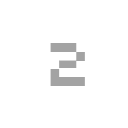
<style>
.page{position:relative;width:128px;height:128px;background:#ffffff}
.page>*{position:absolute;margin:0}
.t1{font:72px "Silkscreen";color:#a3a3a3}
</style>
<div class="page">
<p class="t1" style="left:50px;top:43px;width:35px;height:43px">2</p>
</div>
